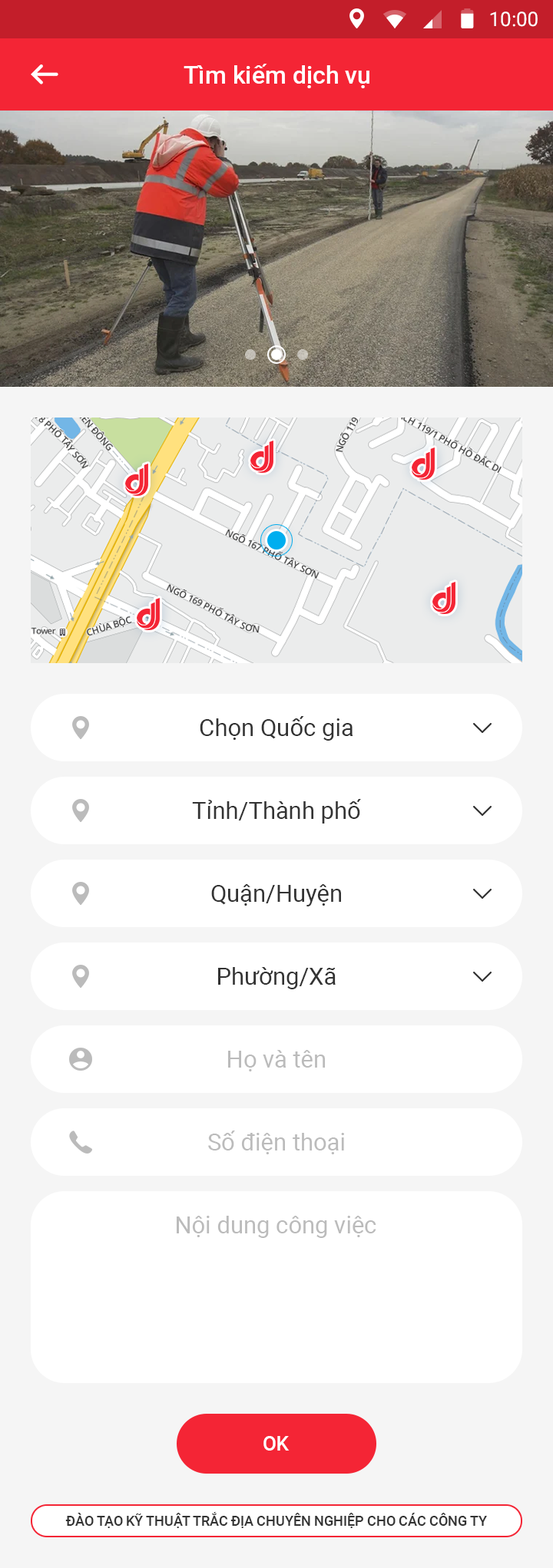
<style>
.page{position:relative;width:553px;height:1568px;background:#ffffff}
.page>*{position:absolute;margin:0}
.t1{font:20px "Roboto-Regular";color:#ffffff}
.t2{font:24.6px "Roboto-Medium";color:#ffffff}
.t3{font:23.8px "Roboto-Regular";color:#333333}
.t4{font:23.8px "Roboto-Regular";color:#bbbbbb}
.t5{font:20px "Roboto-Medium";color:#ffffff;text-transform:uppercase}
.t6{font:13.8px "Roboto-Medium";color:#333333;text-transform:uppercase}
</style>
<div class="page">
<p class="t1" style="left:490px;top:12px;width:47px;height:15px">10:00</p>
<p class="t2" style="left:183px;top:64px;width:186px;height:24px">Tìm kiếm dịch vụ</p>
<p class="t3" style="left:200px;top:716px;width:153px;height:25px">Chọn Quốc gia</p>
<p class="t3" style="left:192px;top:799px;width:169px;height:25px">Tỉnh/Thành phố</p>
<p class="t3" style="left:211px;top:884px;width:130px;height:22px">Quận/Huyện</p>
<p class="t3" style="left:218px;top:967px;width:117px;height:22px">Phường/Xã</p>
<p class="t4" style="left:228px;top:1050px;width:97px;height:21px">Họ và tên</p>
<p class="t4" style="left:208px;top:1131px;width:136px;height:23px">Số điện thoại</p>
<p class="t4" style="left:177px;top:1216px;width:199px;height:22px">Nội dung công việc</p>
<p class="t5" style="left:263px;top:1436px;width:26px;height:15px">Ok</p>
<p class="t6" style="left:65px;top:1512px;width:422px;height:16px">đào tạo kỹ thuật trắc địa chuyên nghiệp cho các công ty</p>
</div>
